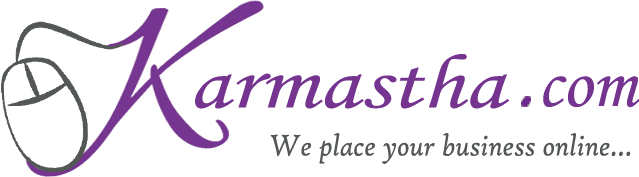
<style>
.page{position:relative;width:639px;height:177px;background:#ffffff}
.page>*{position:absolute;margin:0}
.t1{font:77.3px "MonotypeCorsiva";color:#753490;scale:1.25 1}
.t2{font:71.9px "MonotypeCorsiva";color:#753490}
.t3{font:32.3px "HighTowerText-Italic";color:#535855;scale:0.93 1}
</style>
<div class="page">
<p class="t1" style="left:195px;top:54px;width:315px;height:55px">armastha</p>
<p class="t2" style="left:543px;top:76px;width:97px;height:32px">com</p>
<p class="t3" style="left:270px;top:133px;width:361px;height:31px">We place your business online...</p>
</div>
